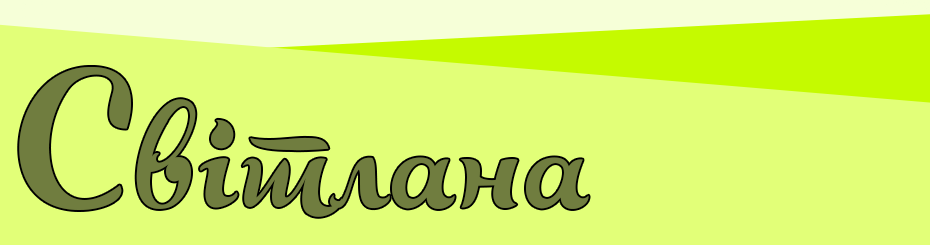
<style>
.page{position:relative;width:930px;height:245px;background:#e2ff78}
.page>*{position:absolute;margin:0}
.t1{font:150px "LovelySofiaBG";color:#707d3f}
.t2{font:250px "LovelySofiaBG";color:#707d3f}
</style>
<div class="page">
<p class="t1" style="left:19px;top:67px;width:570px;height:150px"><span class="t2">С</span>вiтлана</p>
</div>
